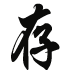
<style>
.page{position:relative;width:75px;height:75px;background:#ffffff}
.page>*{position:absolute;margin:0}
.t1{font:72px "STXingkai";color:#0b0b0a}
</style>
<div class="page">
<p class="t1" style="left:11px;top:3px;width:49px;height:67px">存</p>
</div>
